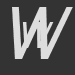
<style>
.page{position:relative;width:75px;height:75px;background:#333333}
.page>*{position:absolute;margin:0}
.t1{font:72px "LucidaSans-Italic";color:#dddddd}
</style>
<div class="page">
<p class="t1" style="left:12px;top:7px;width:61px;height:52px">W</p>
</div>
